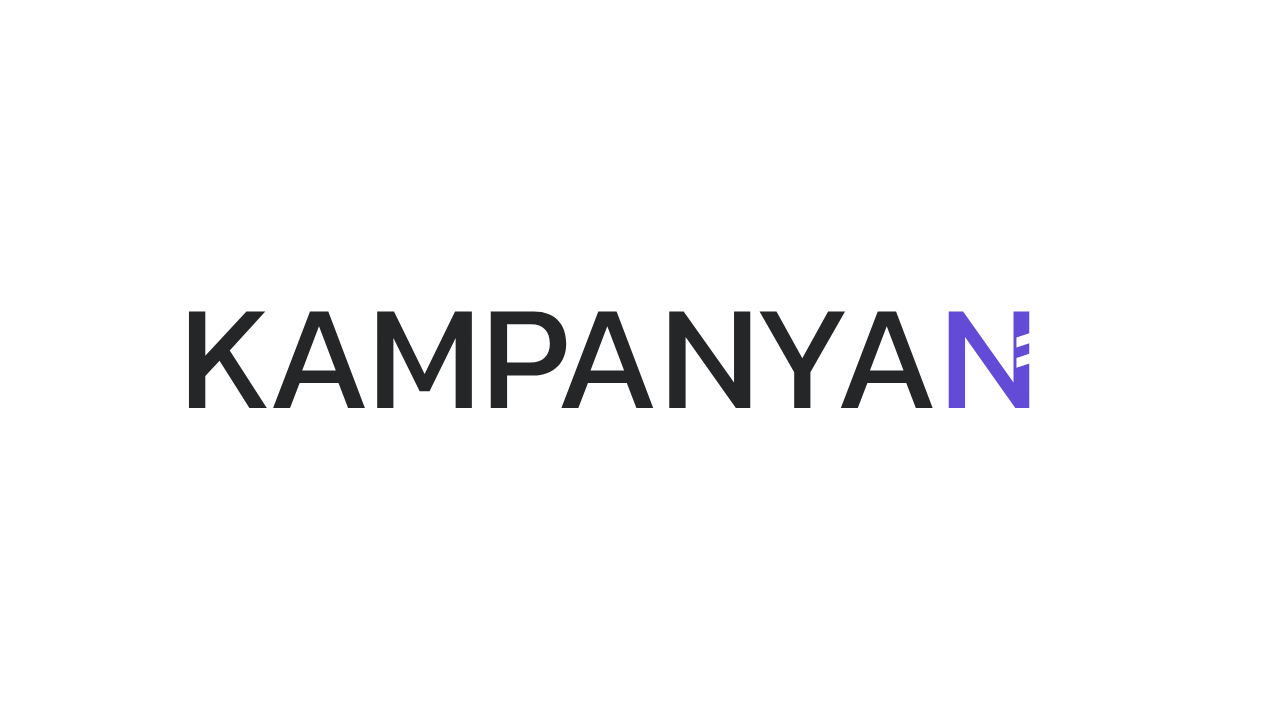
<style>
.page{position:relative;width:1280px;height:720px;background:#ffffff}
.page>*{position:absolute;margin:0}
.t1{font:150px "Kanit-Regular";color:#252627}
.t2{font:150px "Kanit-Regular";color:#644bd7}
.t3{font:150px "Kanit-Regular";color:#ffffff}
</style>
<div class="page">
<p class="t1" style="left:188px;top:311px;width:842px;height:97px">KAMPANYA<span class="t2">N</span></p>
<p class="t3" style="left:1016px;top:311px;width:75px;height:97px">₺</p>
</div>
